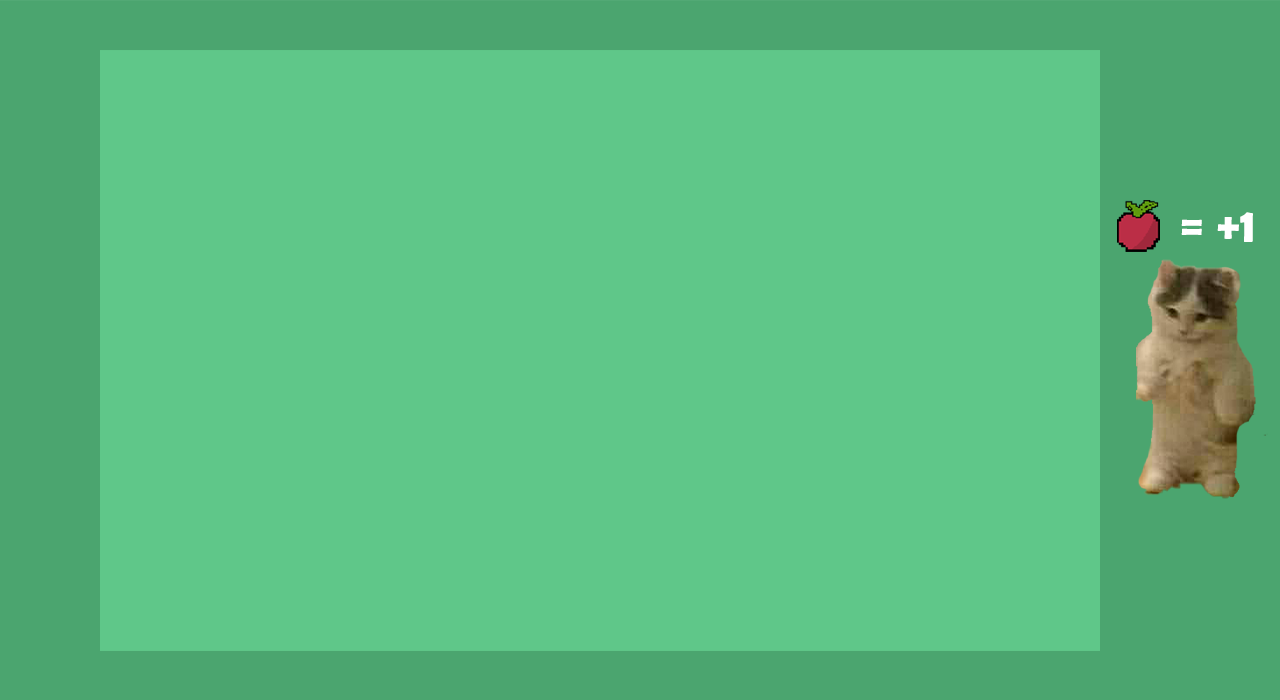
<style>
.page{position:relative;width:1280px;height:700px;background:#5fc789}
.page>*{position:absolute;margin:0}
.t1{font:48.6px "BerlinSansFBDemi-Bold";letter-spacing:0.01em;color:#ffffff}
</style>
<div class="page">
<p class="t1" style="left:1181px;top:212px;width:72px;height:30px">= +1</p>
</div>
